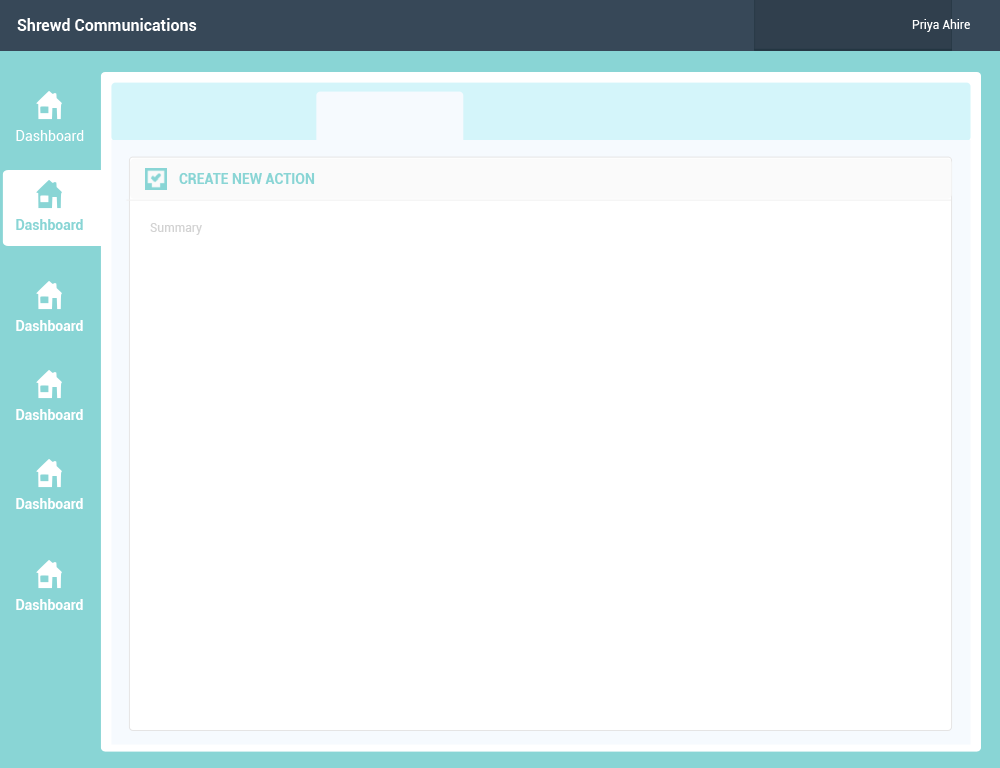
<style>
.page{position:relative;width:1000px;height:768px;background:#ffffff}
.page>*{position:absolute;margin:0}
.t1{font:16px "Roboto-Bold";color:#ffffff}
.t2{font:12px "Roboto-Regular";color:#ffffff}
.t3{font:14px "Roboto-Bold"}
.t4{font:14px "Roboto-Regular";color:#ffffff}
.t5{font:14px "Roboto-Bold";color:#89d5d5}
.t6{font:12px "Roboto-Regular";color:#d2d2d2}
.t7{font:14px "Roboto-Bold";color:#ffffff}
</style>
<div class="page">
<p class="t1" style="left:17px;top:18px;width:180px;height:13px">Shrewd Communications</p>
<p class="t2" style="left:912px;top:19px;width:58px;height:13px">Priya Ahire</p>
<p class="t3" style="left:16px;top:130px;width:67px;height:11px">Dashboard</p>
<p class="t4" style="left:16px;top:130px;width:68px;height:11px">Dashboard</p>
<p class="t5" style="left:179px;top:173px;width:136px;height:11px">CREATE NEW ACTION</p>
<p class="t5" style="left:179px;top:173px;width:136px;height:11px">CREATE NEW ACTION</p>
<p class="t6" style="left:150px;top:223px;width:52px;height:12px">Summary</p>
<p class="t6" style="left:150px;top:223px;width:52px;height:12px">Summary</p>
<p class="t7" style="left:16px;top:320px;width:67px;height:11px">Dashboard</p>
<p class="t7" style="left:16px;top:320px;width:67px;height:11px">Dashboard</p>
<p class="t7" style="left:16px;top:409px;width:67px;height:11px">Dashboard</p>
<p class="t7" style="left:16px;top:409px;width:67px;height:11px">Dashboard</p>
<p class="t7" style="left:16px;top:498px;width:67px;height:11px">Dashboard</p>
<p class="t7" style="left:16px;top:498px;width:67px;height:11px">Dashboard</p>
<p class="t7" style="left:16px;top:599px;width:67px;height:11px">Dashboard</p>
<p class="t7" style="left:16px;top:599px;width:67px;height:11px">Dashboard</p>
</div>
